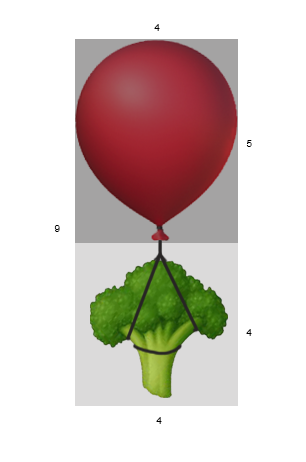
<style>
.page{position:relative;width:306px;height:462px;background:#ffffff}
.page>*{position:absolute;margin:0}
.t1{font:10px "ArialMT";color:#000000}
</style>
<div class="page">
<p class="t1" style="left:154px;top:24px;width:6px;height:7px">4</p>
<p class="t1" style="left:246px;top:140px;width:6px;height:7px">5</p>
<p class="t1" style="left:54px;top:225px;width:6px;height:7px">9</p>
<p class="t1" style="left:246px;top:329px;width:6px;height:7px">4</p>
<p class="t1" style="left:156px;top:417px;width:6px;height:7px">4</p>
</div>
